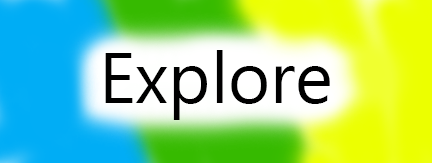
<style>
.page{position:relative;width:432px;height:163px}
.page>*{position:absolute;margin:0}
.t1{font:72px "MyanmarText";color:#000000}
</style>
<div class="page">
<p class="t1" style="left:105px;top:50px;width:225px;height:70px">Explore</p>
</div>
